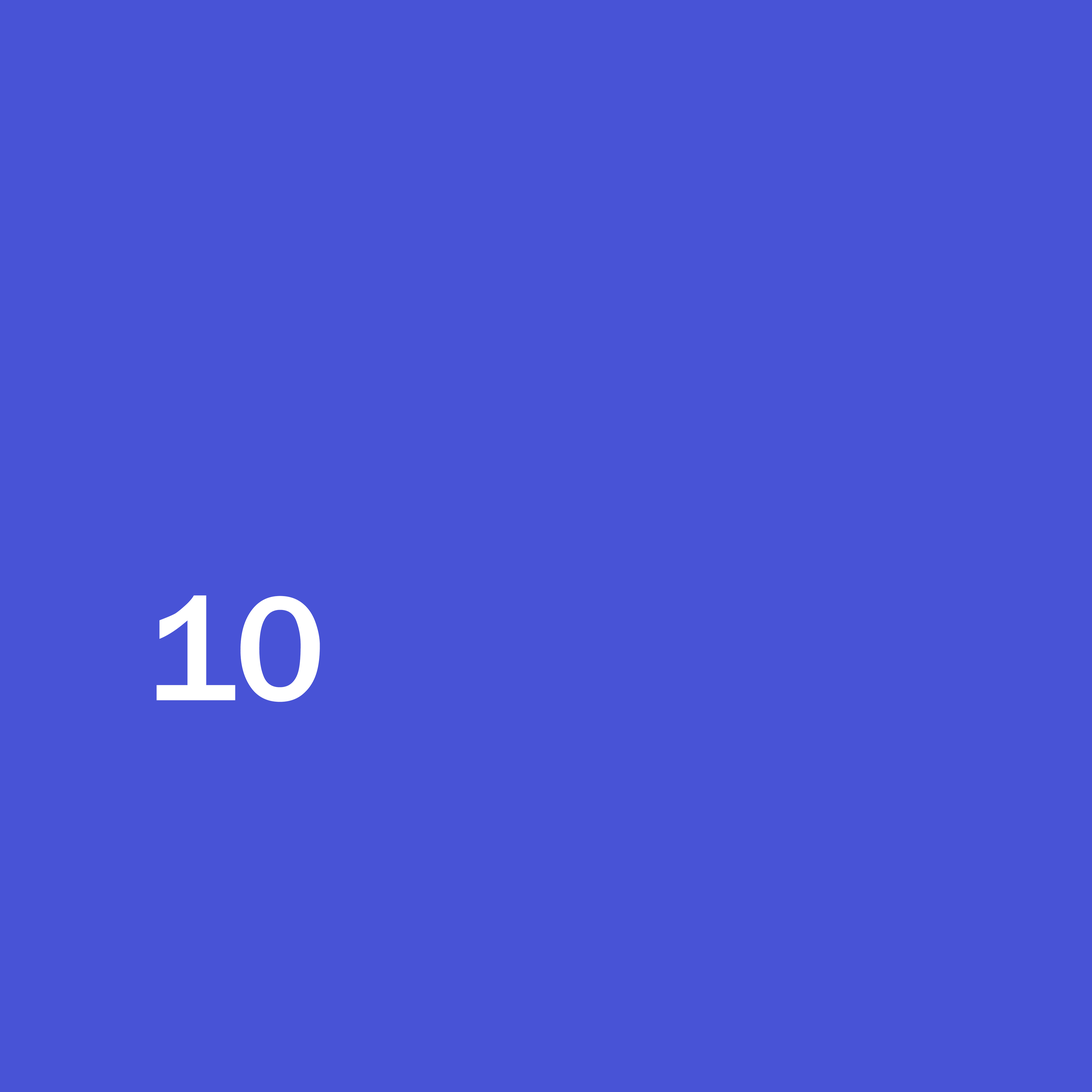
<style>
.page{position:relative;width:1092px;height:1092px;background:#4853d6}
.page>*{position:absolute;margin:0}
.t1{font:154px "FranklinGothic-Medium";color:#ffffff}
</style>
<div class="page">
<p class="t1" style="left:156px;top:595px;width:164px;height:107px">10</p>
</div>
